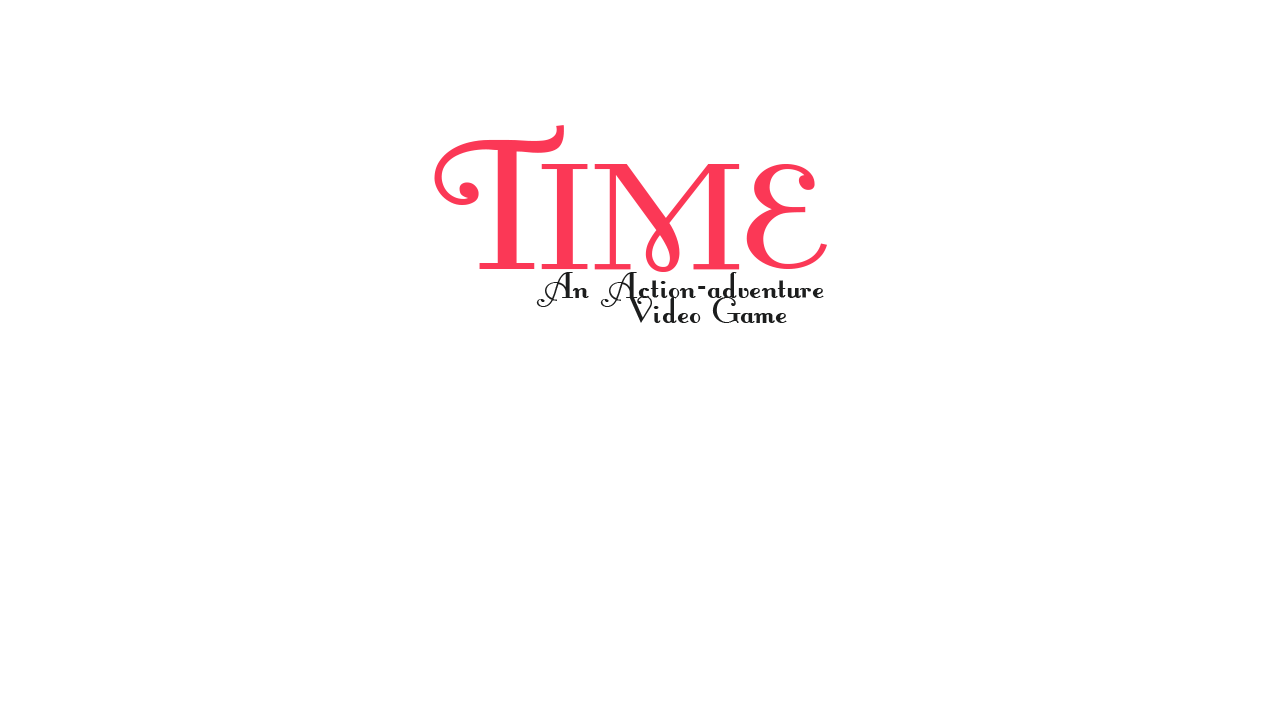
<style>
.page{position:relative;width:1280px;height:720px;background:#ffffff}
.page>*{position:absolute;margin:0}
.t1{font:217.6px "FontleroyBrownNF";color:#fb3856;scale:1.16 1}
.t2{font:181.4px "FontleroyBrownNF";color:#fb3856;scale:1.16 1}
.t3{font:43.6px "FontleroyBrownNF";color:#1c1d1d;scale:1.18 1}
</style>
<div class="page">
<p class="t1" style="left:434px;top:125px;width:130px;height:144px">T</p>
<p class="t2" style="left:541px;top:164px;width:286px;height:108px">IME</p>
<p class="t3" style="left:536px;top:272px;width:288px;height:35px">An Action-adventure</p>
<p class="t3" style="left:626px;top:296px;width:161px;height:27px">Video Game</p>
</div>
